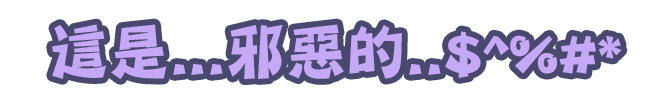
<style>
.page{position:relative;width:657px;height:100px;background:#ffffff}
.page>*{position:absolute;margin:0}
.t1{font:60.1px "DFPingJu-W7-WINP-BF";color:#c5a9f6}
</style>
<div class="page">
<p class="t1" style="left:52px;top:24px;width:570px;height:56px">這是...邪惡的..$^%#*</p>
</div>
